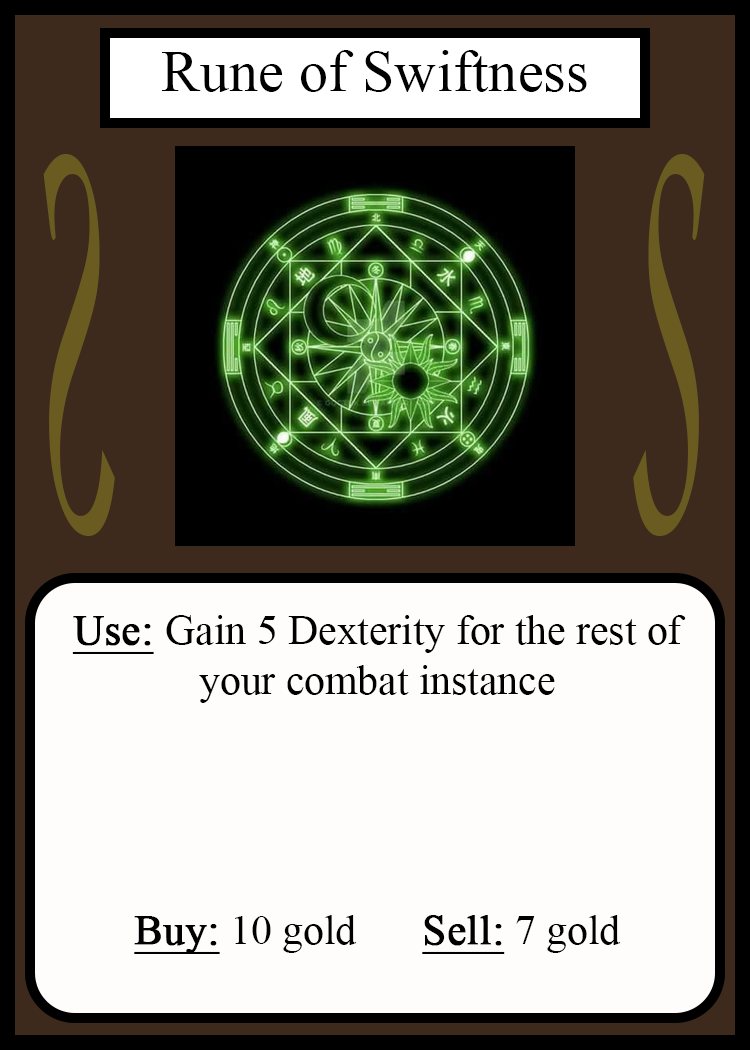
<style>
.page{position:relative;width:750px;height:1050px;background:#fffcfc}
.page>*{position:absolute;margin:0}
.t1{font:58.3px "TimesNewRomanPSMT";color:#010101}
.t2{font:548.5px "Apple-Chancery";color:#6a5c21;scale:0.27 1}
.t3{font:548.2px "Apple-Chancery";color:#6a5c21;scale:0.27 1}
.t4{font:41.7px "TimesNewRomanPSMT";color:#000000}
.t5{font:41.7px "TimesNewRomanPSMT";color:#000000;font-weight:bold;text-decoration:underline}
</style>
<div class="page">
<p class="t1" style="left:162px;top:50px;width:425px;height:42px">Rune of Swiftness</p>
<p class="t2" style="left:43px;top:154px;width:72px;height:382px;rotate:180deg">S</p>
<p class="t3" style="left:633px;top:154px;width:72px;height:382px">S</p>
<p class="t4" style="left:72px;top:615px;width:614px;height:339px;text-align:center"><span class="t5">Use: </span>Gain 5 Dexterity for the rest of<br>your combat instance<br><br><br><br><br><span class="t5">Buy:</span> 10 gold   <span class="t5">Sell:</span> 7 gold</p>
</div>
